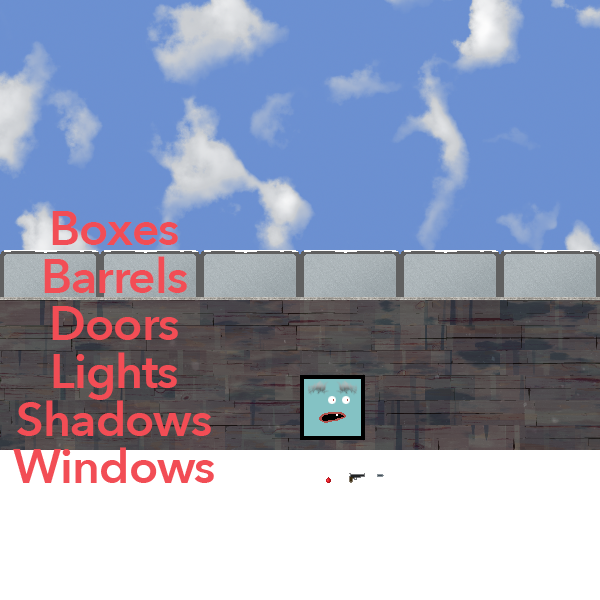
<style>
.page{position:relative;width:600px;height:600px;background:#ffffff}
.page>*{position:absolute;margin:0}
.t1{font:48px "AvenirNext-DemiBold";letter-spacing:-0.02em;color:#f24d55}
</style>
<div class="page">
<p class="t1" style="left:13px;top:211px;width:201px;height:272px;text-align:center">Boxes<br>Barrels<br>Doors<br>Lights<br>Shadows<br>Windows</p>
</div>
